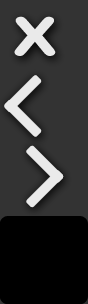
<style>
.page{position:relative;width:88px;height:304px;background:#333333}
.page>*{position:absolute;margin:0}
.t1{font:72px "ArialRoundedMTBold";color:#eaeaea;scale:1.21 1}
</style>
<div class="page">
<p class="t1" style="left:14px;top:16px;width:42px;height:40px">x</p>
</div>
